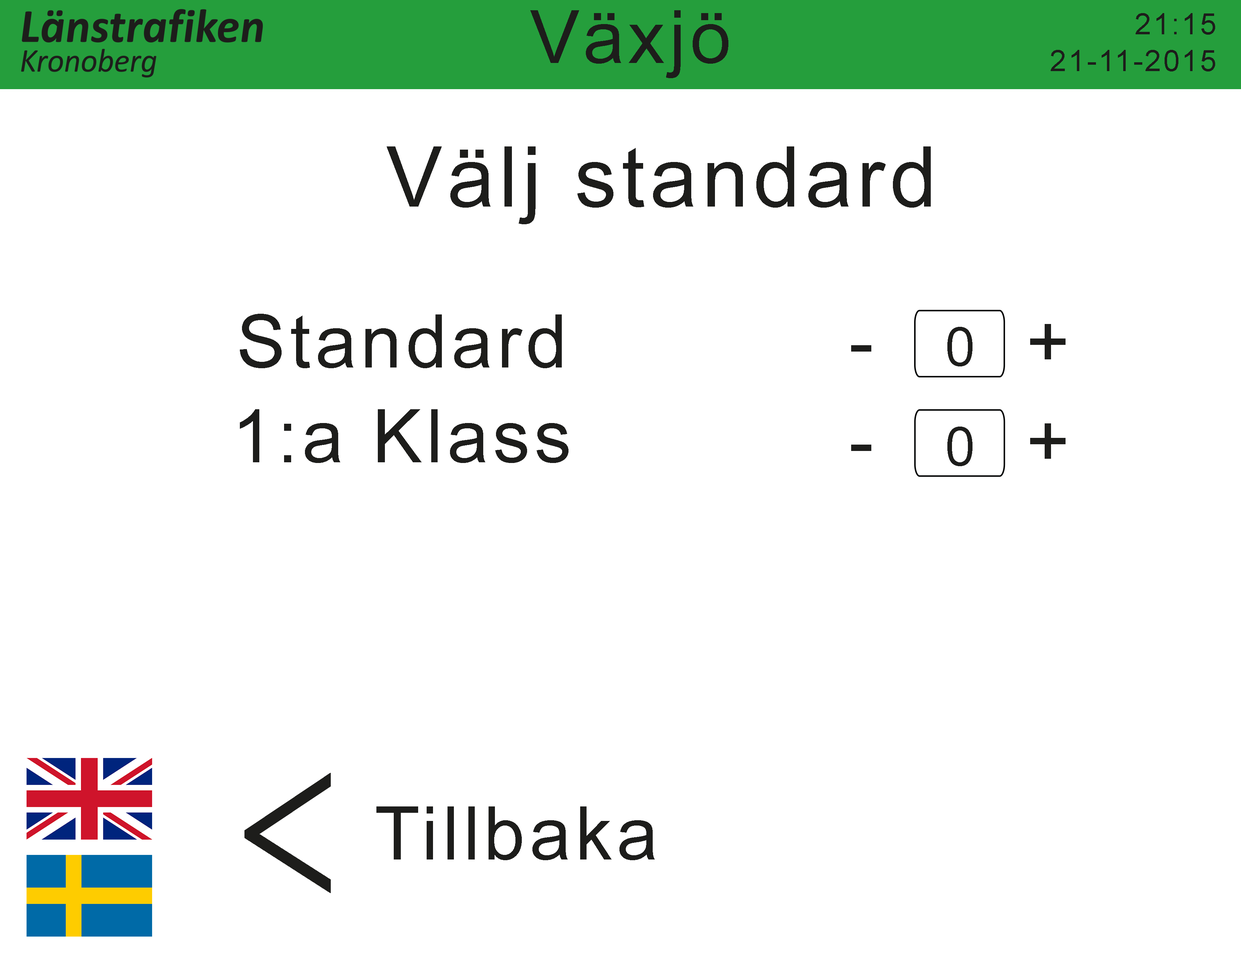
<style>
.page{position:relative;width:1241px;height:961px;background:#ffffff}
.page>*{position:absolute;margin:0}
.t1{font:73.4px "ArialMT";letter-spacing:0.06em;color:#1d1d1b}
.t2{font:29.8px "ArialMT";letter-spacing:0.06em;color:#1d1d1b}
.t3{font:84px "ArialMT";letter-spacing:0.06em;color:#1d1d1b}
.t4{font:73.8px "ArialMT";letter-spacing:0.06em;color:#1d1d1b}
.t5{font:53.7px "ArialMT";letter-spacing:0.06em;color:#1d1d1b}
.t6{font:226px "BanglaMN";letter-spacing:0.06em;color:#1d1d1b;scale:0.65 1}
</style>
<div class="page">
<p class="t1" style="left:530px;top:10px;width:198px;height:68px">Växjö</p>
<p class="t2" style="left:1135px;top:13px;width:80px;height:22px">21:15</p>
<p class="t2" style="left:1051px;top:50px;width:164px;height:21px">21-11-2015</p>
<p class="t3" style="left:387px;top:146px;width:544px;height:78px">Välj standard</p>
<p class="t4" style="left:240px;top:314px;width:322px;height:54px">Standard</p>
<p class="t5" style="left:947px;top:327px;width:25px;height:39px">0</p>
<p class="t4" style="left:1030px;top:324px;width:35px;height:35px">+</p>
<p class="t4" style="left:240px;top:409px;width:328px;height:54px">1:a Klass</p>
<p class="t4" style="left:1030px;top:423px;width:35px;height:36px">+</p>
<p class="t5" style="left:947px;top:427px;width:25px;height:39px">0</p>
<p class="t6" style="left:244px;top:773px;width:87px;height:120px">&lt;</p>
<p class="t4" style="left:376px;top:806px;width:279px;height:54px">Tillbaka</p>
</div>
